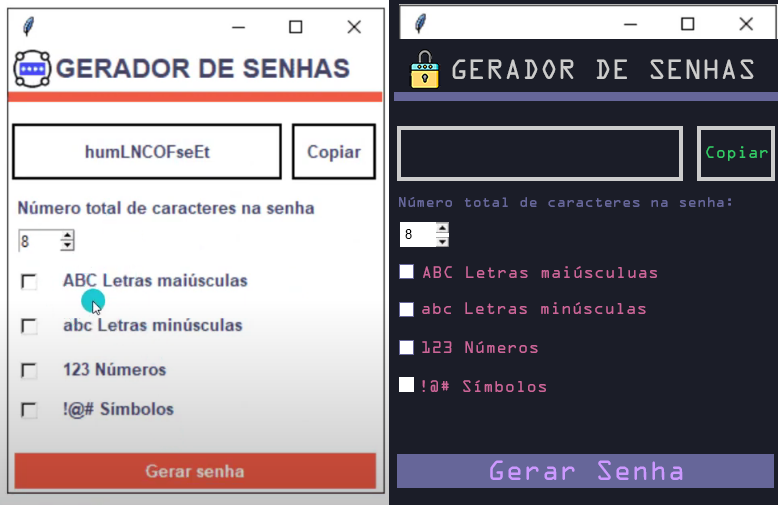
<style>
.page{position:relative;width:778px;height:505px;background:#1b1d28}
.page>*{position:absolute;margin:0}
.t1{font:25px "OCRAStd";color:#cccccc}
.t2{font:15px "OCRAStd";color:#33cc66}
.t3{font:13px "OCRAStd";color:#666699}
.t4{font:13px "ArialMT";color:#000000}
.t5{font:15px "OCRAStd";color:#cc6699}
.t6{font:25px "OCRAStd";color:#cc99ff}
</style>
<div class="page">
<p class="t1" style="left:452px;top:59px;width:302px;height:20px">GERADOR DE SENHAS</p>
<p class="t2" style="left:706px;top:146px;width:62px;height:15px">Copiar</p>
<p class="t3" style="left:399px;top:197px;width:332px;height:10px">Número total de caracteres na senha:</p>
<p class="t4" style="left:405px;top:229px;width:7px;height:10px">8</p>
<p class="t5" style="left:423px;top:266px;width:234px;height:12px">ABC Letras maiúsculuas</p>
<p class="t5" style="left:422px;top:302px;width:224px;height:12px">abc Letras minúsculas</p>
<p class="t5" style="left:422px;top:341px;width:116px;height:12px">123 Números</p>
<p class="t5" style="left:422px;top:380px;width:124px;height:12px">!@# Símbolos</p>
<p class="t6" style="left:490px;top:460px;width:193px;height:20px">Gerar Senha</p>
</div>
